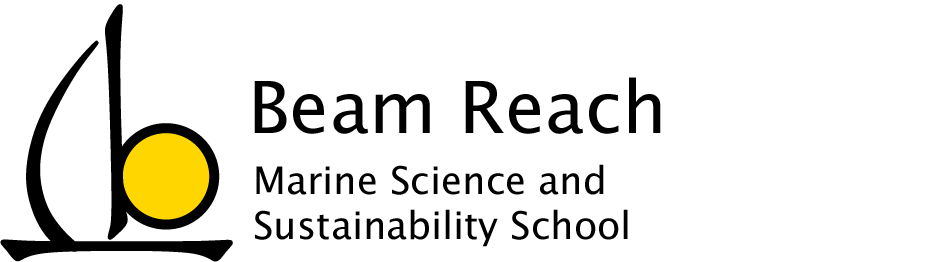
<style>
.page{position:relative;width:936px;height:262px;background:#ffffff}
.page>*{position:absolute;margin:0}
.t1{font:72px "LucidaSans";color:#000000}
.t2{font:38px "LucidaSans";color:#000000}
</style>
<div class="page">
<p class="t1" style="left:254px;top:77px;width:407px;height:57px">Beam Reach</p>
<p class="t2" style="left:255px;top:164px;width:373px;height:83px">Marine Science and Sustainability School</p>
</div>
